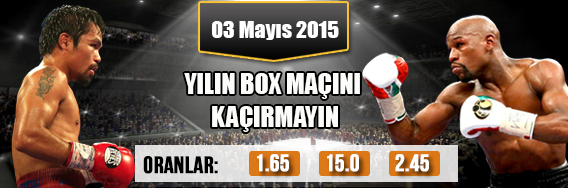
<style>
.page{position:relative;width:568px;height:188px}
.page>*{position:absolute;margin:0}
.t1{font:21.9px "Impact";color:#ffffff}
.t2{font:26px/32.9px "Impact";color:#fcfcfa}
.t3{font:24px "BebasNeue";letter-spacing:-0.005em;color:#000000;font-weight:bold}
.t4{font:24px "BebasNeue";letter-spacing:-0.005em;color:#ffffff;font-weight:bold}
</style>
<div class="page">
<p class="t1" style="left:212px;top:21px;width:127px;height:19px">03 Mayıs 2015</p>
<p class="t2" style="left:184px;top:73px;width:176px;height:59px;text-align:center">YILIN BOX MAÇINI <br>KAÇIRMAYIN</p>
<p class="t3" style="left:143px;top:156px;width:75px;height:18px">oranlar:</p>
<p class="t4" style="left:257px;top:154px;width:32px;height:18px">1.65</p>
<p class="t4" style="left:327px;top:154px;width:32px;height:18px">15.0</p>
<p class="t4" style="left:395px;top:154px;width:34px;height:18px">2.45</p>
</div>
